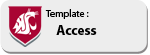
<style>
.page{position:relative;width:150px;height:55px;background:#ededed}
.page>*{position:absolute;margin:0}
.t1{font:10px "MyriadPro-Regular";color:#000000}
.t2{font:14px "MyriadPro-Bold";color:#000000}
</style>
<div class="page">
<p class="t1" style="left:45px;top:9px;width:44px;height:10px">Template :</p>
<p class="t2" style="left:56px;top:25px;width:41px;height:10px">Access</p>
</div>
